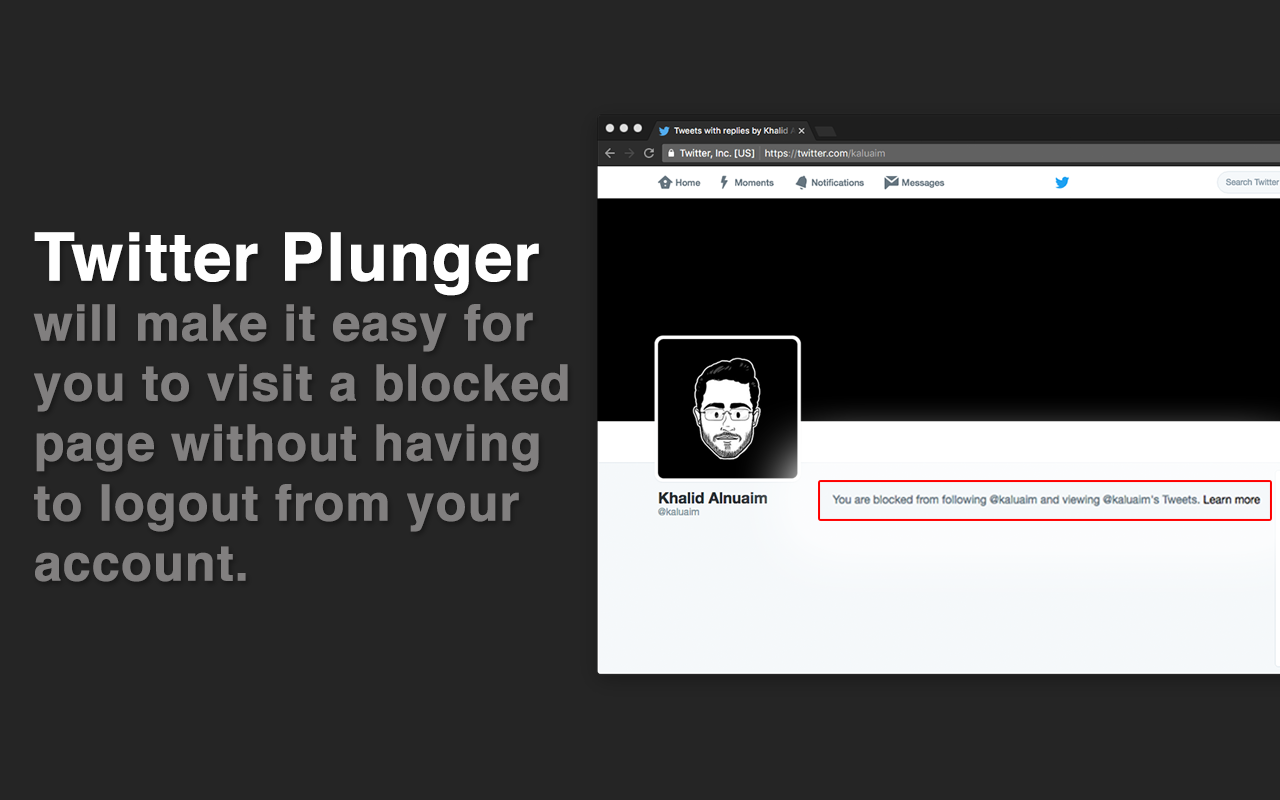
<style>
.page{position:relative;width:1280px;height:800px;background:#252525}
.page>*{position:absolute;margin:0}
.t1{font:50px "Helvetica-Bold";color:#817f7f;font-weight:bold}
.t2{font:66.7px "Helvetica-Bold";color:#ffffff;font-weight:bold}
</style>
<div class="page">
<p class="t1" style="left:33px;top:232px;width:535px;height:350px"><span class="t2">Twitter Plunger </span>will make it easy for you to visit a blocked page without having to logout from your account.</p>
</div>
